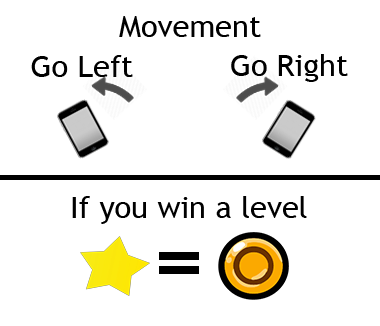
<style>
.page{position:relative;width:380px;height:326px;background:#ffffff}
.page>*{position:absolute;margin:0}
.t1{font:30.4px "TrebuchetMS";color:#000000}
</style>
<div class="page">
<p class="t1" style="left:119px;top:16px;width:142px;height:21px">Movement</p>
<p class="t1" style="left:231px;top:54px;width:117px;height:28px">Go Right</p>
<p class="t1" style="left:31px;top:55px;width:102px;height:22px">Go Left</p>
<p class="t1" style="left:72px;top:196px;width:235px;height:28px">If you win a level</p>
</div>
